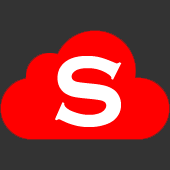
<style>
.page{position:relative;width:170px;height:170px;background:#333333}
.page>*{position:absolute;margin:0}
.t1{font:103.1px "CopperplateGothic-Bold";color:#ffffff}
</style>
<div class="page">
<p class="t1" style="left:55px;top:56px;width:67px;height:71px">S</p>
</div>
